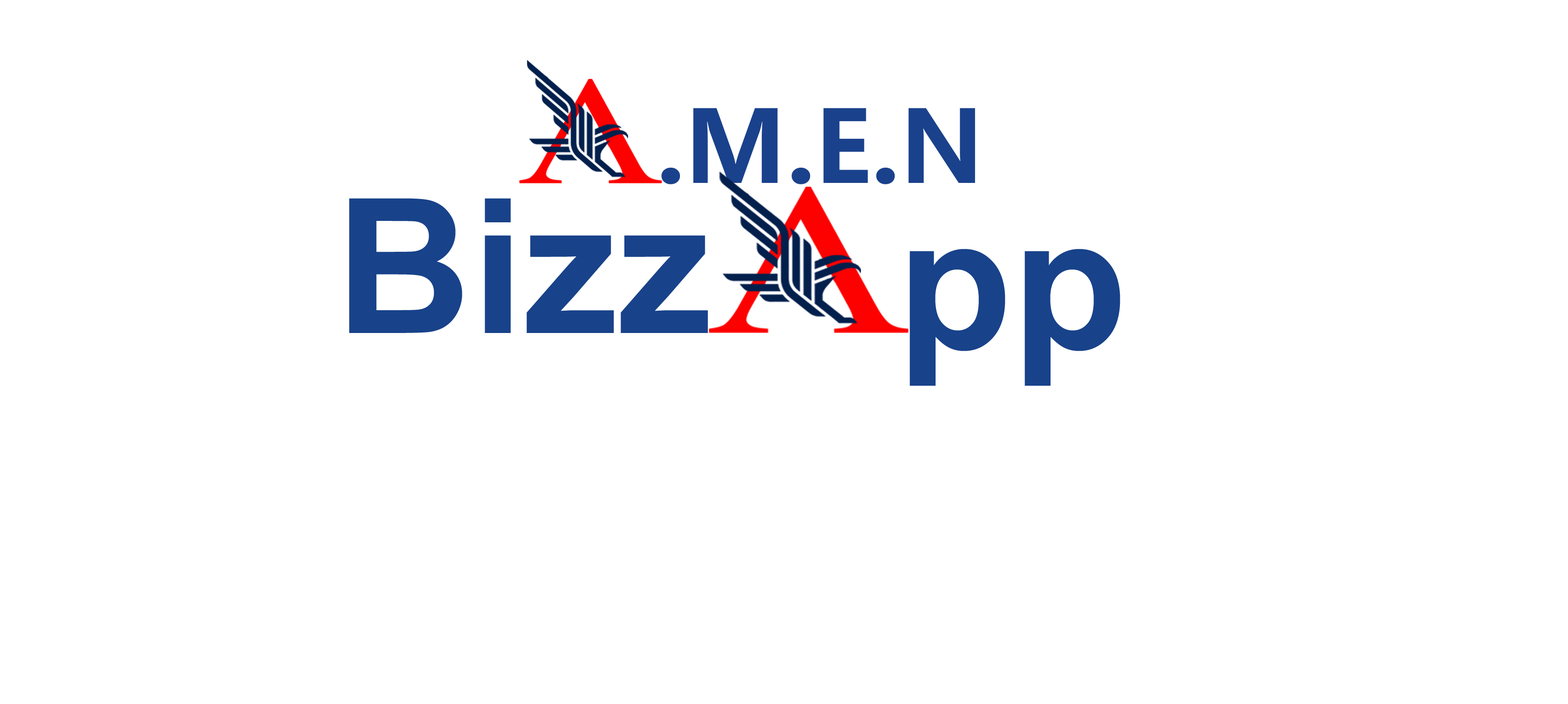
<style>
.page{position:relative;width:1568px;height:704px;background:#ffffff}
.page>*{position:absolute;margin:0}
.t1{font:99px "MicrosoftYaHei";color:#1a418c}
.t2{font:188.1px "Arial-BoldMT";color:#18428a}
</style>
<div class="page">
<p class="t1" style="left:661px;top:108px;width:314px;height:76px">.M.E.N</p>
<p class="t2" style="left:349px;top:198px;width:359px;height:135px">Bizz</p>
<p class="t2" style="left:909px;top:249px;width:211px;height:137px">pp</p>
</div>
